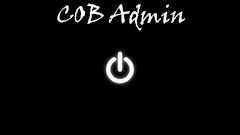
<style>
.page{position:relative;width:240px;height:135px;background:#000000}
.page>*{position:absolute;margin:0}
.t1{font:24px "VinerHandITC";color:#ffffff}
</style>
<div class="page">
<p class="t1" style="left:57px;top:3px;width:129px;height:28px">COB Admin</p>
</div>
